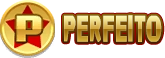
<style>
.page{position:relative;width:165px;height:58px;background:#ffffff}
.page>*{position:absolute;margin:0}
.t1{font:32px "KurokaneStd-EB";font-weight:bold;scale:0.53 1}
</style>
<div class="page">
<p class="t1" style="left:64px;top:15px;width:98px;height:27px">PERFEITO</p>
</div>
